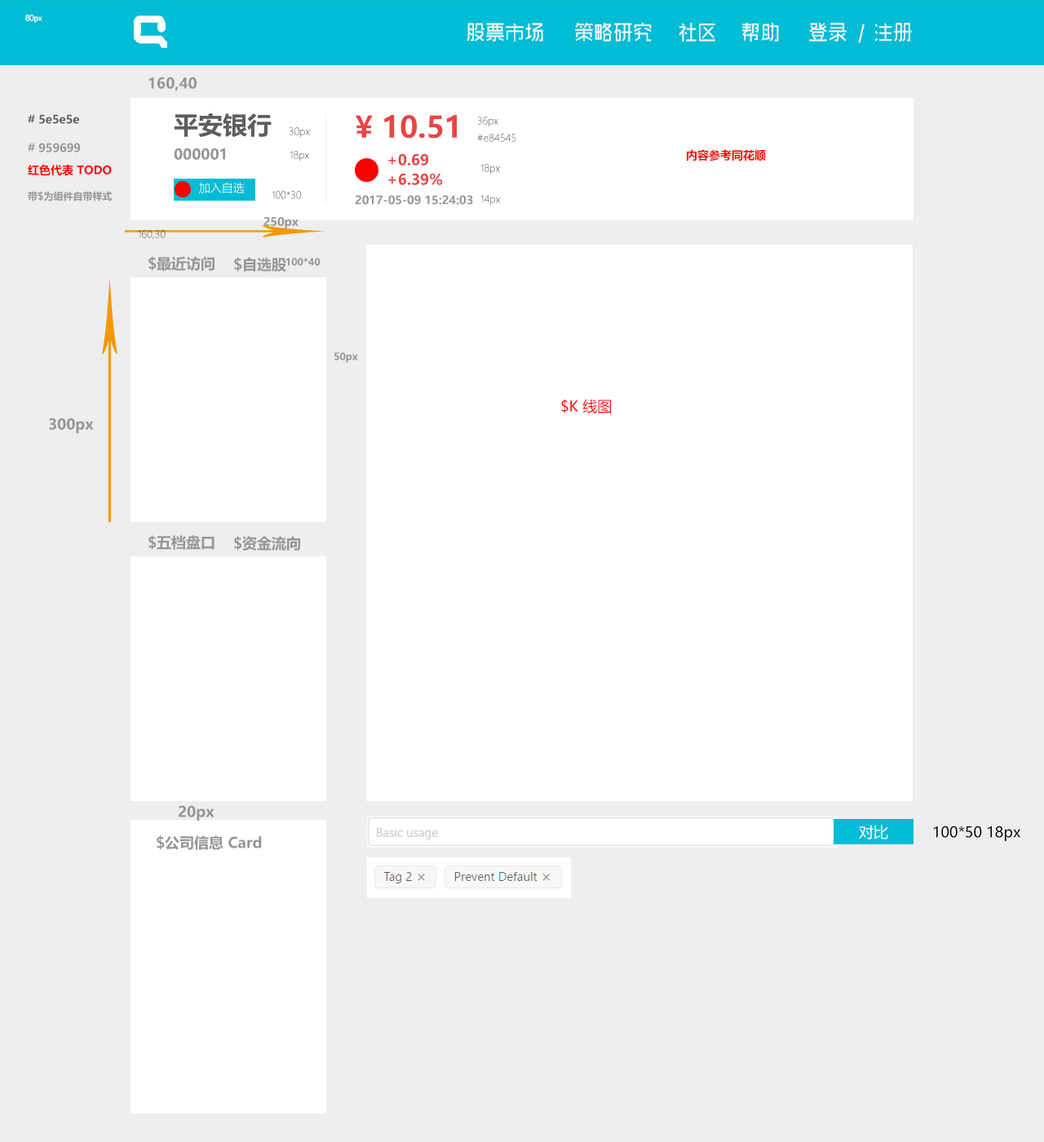
<style>
.page{position:relative;width:1044px;height:1142px;background:#ffffff}
.page>*{position:absolute;margin:0}
.t1{font:14.7px "MicrosoftYaHei-Bold";color:#959699}
.t2{font:24.5px "MicrosoftYaHei-Bold";color:#5e5e5e}
.t3{font:11.4px "MicrosoftYaHei-Bold";color:#5e5e5e}
.t4{font:29.4px "MicrosoftYaHei-Bold";color:#e84545}
.t5{font:9.8px "MicrosoftYaHeiLight"}
.t6{font:11.4px "MicrosoftYaHei-Bold";color:#959699}
.t7{font:11.4px "MicrosoftYaHei-Bold";color:#ff0000}
.t8{font:14.7px "MicrosoftYaHei-Bold";color:#e84545}
.t9{font:11.4px "MicrosoftYaHeiLight";color:#ffffff}
.t10{font:9.8px "MicrosoftYaHei-Bold";color:#959699}
.t11{font:14.7px "MicrosoftYaHei";color:#ff0000}
.t12{font:14.7px "MicrosoftYaHei";color:#ffffff}
.t13{font:14.7px "MicrosoftYaHei";color:#000000}
</style>
<div class="page">
<p class="t1" style="left:148px;top:77px;width:49px;height:14px">160,40</p>
<p class="t2" style="left:174px;top:113px;width:98px;height:25px">平安银行</p>
<p class="t3" style="left:28px;top:114px;width:51px;height:10px"># 5e5e5e</p>
<p class="t4" style="left:355px;top:115px;width:102px;height:24px">¥ 10.51</p>
<p class="t5" style="left:477px;top:117px;width:39px;height:25px">36px #e84545</p>
<p class="t5" style="left:289px;top:127px;width:21px;height:11px">30px</p>
<p class="t6" style="left:28px;top:143px;width:53px;height:10px"># 959699</p>
<p class="t1" style="left:174px;top:148px;width:51px;height:12px">000001</p>
<p class="t7" style="left:687px;top:149px;width:79px;height:13px">内容参考同花顺</p>
<p class="t5" style="left:290px;top:151px;width:19px;height:11px">18px</p>
<p class="t8" style="left:388px;top:153px;width:41px;height:13px">+0.69</p>
<p class="t7" style="left:28px;top:164px;width:84px;height:12px">红色代表 TODO</p>
<p class="t8" style="left:388px;top:173px;width:55px;height:12px">+6.39%</p>
<p class="t5" style="left:480px;top:164px;width:20px;height:11px">18px</p>
<p class="t9" style="left:199px;top:182px;width:46px;height:11px">加入自选</p>
<p class="t10" style="left:28px;top:191px;width:85px;height:10px">带$为组件自带样式</p>
<p class="t5" style="left:272px;top:191px;width:29px;height:8px">100*30</p>
<p class="t6" style="left:355px;top:195px;width:118px;height:10px">2017-05-09 15:24:03</p>
<p class="t5" style="left:480px;top:195px;width:20px;height:11px">14px</p>
<p class="t6" style="left:263px;top:217px;width:36px;height:12px">250px</p>
<p class="t5" style="left:138px;top:230px;width:28px;height:9px">160,30</p>
<p class="t1" style="left:148px;top:256px;width:67px;height:15px">$最近访问</p>
<p class="t1" style="left:234px;top:257px;width:52px;height:15px">$自选股</p>
<p class="t10" style="left:286px;top:258px;width:35px;height:8px">100*40</p>
<p class="t10" style="left:334px;top:352px;width:24px;height:11px">50px</p>
<p class="t11" style="left:561px;top:399px;width:50px;height:15px">$K 线图</p>
<p class="t1" style="left:49px;top:418px;width:45px;height:15px">300px</p>
<p class="t1" style="left:148px;top:535px;width:67px;height:15px">$五档盘口</p>
<p class="t1" style="left:234px;top:536px;width:66px;height:15px">$资金流向</p>
<p class="t1" style="left:179px;top:805px;width:36px;height:16px">20px</p>
<p class="t12" style="left:859px;top:825px;width:29px;height:14px">对比</p>
<p class="t13" style="left:933px;top:826px;width:87px;height:15px">100*50 18px</p>
<p class="t1" style="left:157px;top:835px;width:105px;height:15px">$公司信息 Card</p>
</div>
